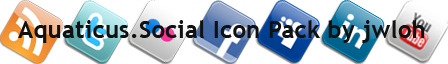
<style>
.page{position:relative;width:448px;height:64px;background:#ffffff}
.page>*{position:absolute;margin:0}
.t1{font:24px "TrebuchetMS-Bold";letter-spacing:0.01em;color:#111111}
</style>
<div class="page">
<p class="t1" style="left:18px;top:20px;width:407px;height:23px">Aquaticus.Social Icon Pack by jwloh</p>
</div>
